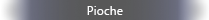
<style>
.page{position:relative;width:209px;height:20px}
.page>*{position:absolute;margin:0}
.t1{font:12.5px "LaoUI";color:#fefefe}
</style>
<div class="page">
<p class="t1" style="left:87px;top:6px;width:36px;height:9px">Pioche</p>
</div>
